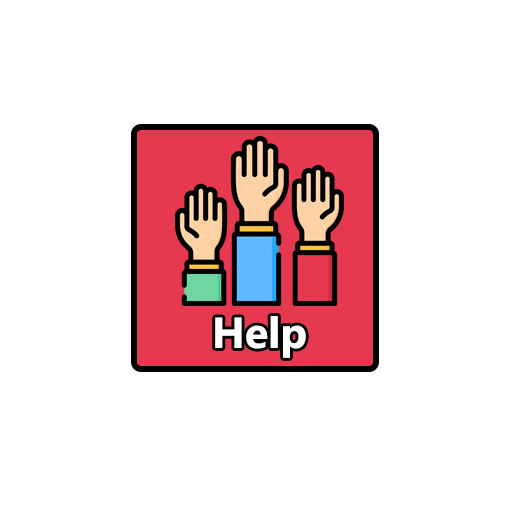
<style>
.page{position:relative;width:512px;height:512px;background:#ffffff}
.page>*{position:absolute;margin:0}
.t1{font:43px "NirmalaUI-Bold";color:#ffffff}
</style>
<div class="page">
<p class="t1" style="left:215px;top:316px;width:91px;height:42px">Help</p>
</div>
